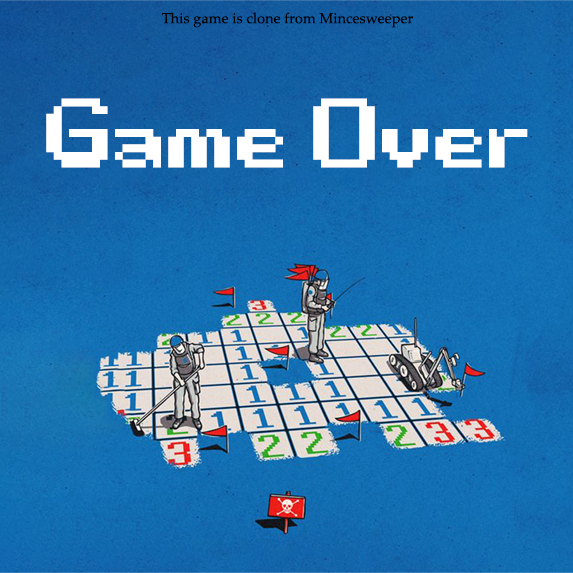
<style>
.page{position:relative;width:573px;height:573px}
.page>*{position:absolute;margin:0}
.t1{font:14.6px "PalatinoLinotype-Roman";color:#000000}
.t2{font:244.2px "Game-Over";color:#ffffff}
</style>
<div class="page">
<p class="t1" style="left:161px;top:12px;width:252px;height:16px">This game is clone from Mincesweeper</p>
<p class="t2" style="left:46px;top:98px;width:482px;height:70px">Game Over</p>
</div>
